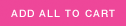
<style>
.page{position:relative;width:126px;height:26px;background:#ee4799}
.page>*{position:absolute;margin:0}
.t1{font:10px "HelveticaNeue-Medium";letter-spacing:0.1em;color:#ffffff}
</style>
<div class="page">
<p class="t1" style="left:11px;top:9px;width:104px;height:8px">ADD ALL TO CART</p>
</div>
